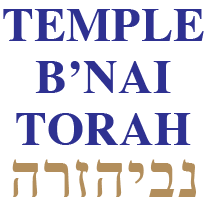
<style>
.page{position:relative;width:208px;height:217px;background:#ffffff}
.page>*{position:absolute;margin:0}
.t1{font:47.9px/52.1px "Times-Bold";letter-spacing:0.005em;color:#2e3191}
.t2{font:62.5px "FrankRuhlLibre-Medium";letter-spacing:0.025em;color:#b28e5c}
</style>
<div class="page">
<p class="t1" style="left:3px;top:9px;width:201px;height:136px;text-align:center">TEMPLE<br>B’NAI<br>TORAH</p>
<p class="t2" style="left:12px;top:159px;width:184px;height:38px">יהזרה‎נב‎</p>
</div>
